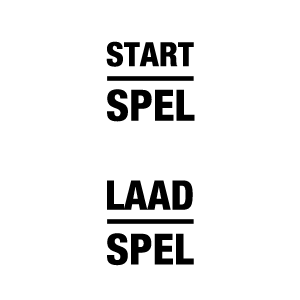
<style>
.page{position:relative;width:300px;height:300px;background:#ffffff}
.page>*{position:absolute;margin:0}
.t1{font:33.2px "HelveticaNeue-HeavyCond";color:#000000;text-transform:uppercase}
.t2{font:42.9px "HelveticaNeue-HeavyCond";color:#000000;text-transform:uppercase}
.t3{font:40.7px "HelveticaNeue-HeavyCond";color:#000000;text-transform:uppercase}
.t4{font:42.7px "HelveticaNeue-HeavyCond";color:#000000;text-transform:uppercase}
</style>
<div class="page">
<p class="t1" style="left:106px;top:41px;width:88px;height:26px">START</p>
<p class="t2" style="left:107px;top:89px;width:88px;height:33px">SPEL</p>
<p class="t3" style="left:107px;top:180px;width:86px;height:30px">Laad</p>
<p class="t4" style="left:107px;top:233px;width:87px;height:33px">SPEL</p>
</div>
